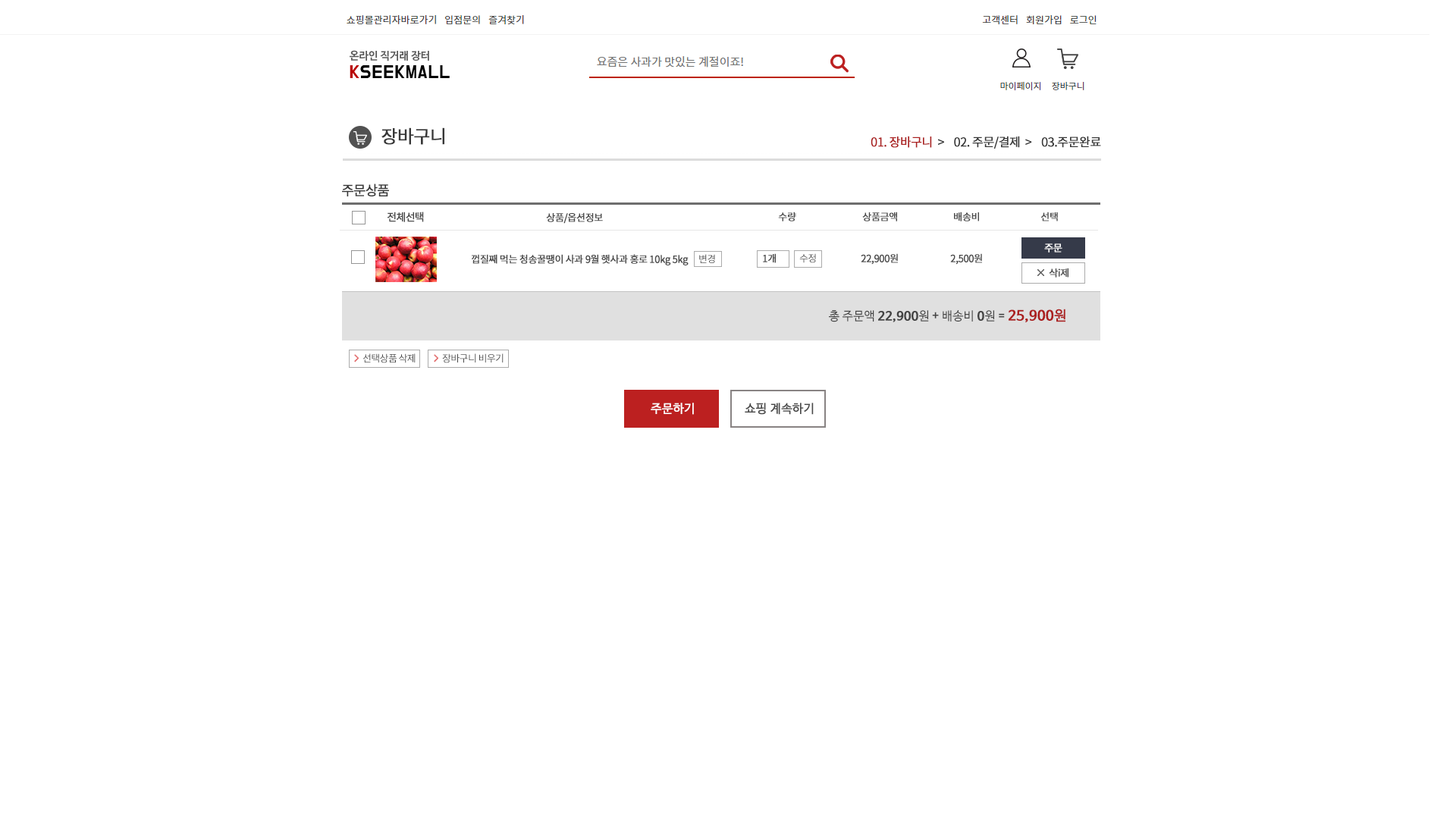
<style>
.page{position:relative;width:1456px;height:819px;background:#ffffff}
.page>*{position:absolute;margin:0}
.t1{font:18.2px "NotoSansCJKkr-Regular";letter-spacing:-0.05em;color:#373737;font-weight:bold}
.t2{font:12.1px "NotoSansCJKkr-Regular";letter-spacing:-0.05em;color:#373737;font-weight:bold}
.t3{font:12.1px "NotoSansCJKkr-Regular";letter-spacing:-0.05em;color:#ab2020;font-weight:bold}
.t4{font:13.6px "NotoSansCJKkr-Regular";letter-spacing:-0.075em;color:#373737;font-weight:bold}
.t5{font:10.6px "NotoSansCJKkr-Regular";letter-spacing:-0.075em;color:#484848;font-weight:bold}
.t6{font:9.9px "NotoSansCJKkr-Regular";letter-spacing:-0.05em;color:#484848;font-weight:bold}
.t7{font:9.9px "NotoSansCJKkr-Regular";letter-spacing:-0.05em;color:#ffffff;font-weight:bold}
.t8{font:9.9px "NotoSansCJKkr-Regular";letter-spacing:-0.05em;color:#484848}
.t9{font:9.9px "NotoSansCJKkr-Regular";letter-spacing:-0.05em;color:#494949;font-weight:bold}
.t10{font:12.1px "NanumBarunGothicBold";color:#434343;font-weight:bold}
.t11{font:12.1px "NanumBarunGothic";color:#434343}
.t12{font:12.1px "NanumBarunGothicBold";color:#434343}
.t13{font:13.6px "NanumBarunGothicBold";color:#ab2020;font-weight:bold}
.t14{font:13.6px "NanumBarunGothic";color:#ab2020;font-weight:bold}
.t15{font:12.1px "NanumBarunGothic";color:#ffffff;font-weight:bold}
.t16{font:12.1px "NanumBarunGothic";color:#494949;font-weight:bold}
</style>
<div class="page">
<p class="t1" style="left:381px;top:127px;width:63px;height:18px">장바구니</p>
<p class="t2" style="left:871px;top:136px;width:230px;height:13px"><span class="t3">01. 장바구니  </span>&gt;    02. 주문/결제  &gt;    03.주문완료</p>
<p class="t4" style="left:342px;top:184px;width:47px;height:12px">주문상품</p>
<p class="t5" style="left:387px;top:212px;width:37px;height:10px">전체선택</p>
<p class="t6" style="left:546px;top:212px;width:57px;height:12px">상품/옵션정보</p>
<p class="t6" style="left:778px;top:212px;width:18px;height:9px">수량</p>
<p class="t6" style="left:862px;top:212px;width:35px;height:9px">상품금액</p>
<p class="t6" style="left:954px;top:212px;width:25px;height:9px">배송비</p>
<p class="t6" style="left:1040px;top:212px;width:18px;height:9px">선택</p>
<p class="t7" style="left:1044px;top:243px;width:18px;height:10px">주문</p>
<p class="t6" style="left:472px;top:254px;width:217px;height:11px">껍질째 먹는 청송꿀땡이 사과 9월 햇사과 홍로 10kg 5kg</p>
<p class="t8" style="left:699px;top:254px;width:16px;height:9px">변경</p>
<p class="t6" style="left:763px;top:253px;width:13px;height:10px">1개</p>
<p class="t8" style="left:799px;top:253px;width:17px;height:10px">수정</p>
<p class="t6" style="left:861px;top:253px;width:37px;height:12px">22,900원</p>
<p class="t6" style="left:950px;top:253px;width:32px;height:12px">2,500원</p>
<p class="t9" style="left:1049px;top:268px;width:19px;height:10px">삭i제</p>
<p class="t10" style="left:829px;top:309px;width:236px;height:13px"><span class="t11">총 주문액 </span>22,900<span class="t11">원 </span><span class="t12">+ </span><span class="t11">배송비 </span>0<span class="t11">원</span><span class="t12"> = </span><span class="t13">25,900</span><span class="t14">원</span></p>
<p class="t8" style="left:362px;top:353px;width:54px;height:10px">선택상품 삭제</p>
<p class="t8" style="left:442px;top:353px;width:62px;height:10px">장바구니 비우기</p>
<p class="t15" style="left:651px;top:403px;width:43px;height:12px">주문하기</p>
<p class="t16" style="left:745px;top:403px;width:69px;height:12px">쇼핑 계속하기</p>
</div>
